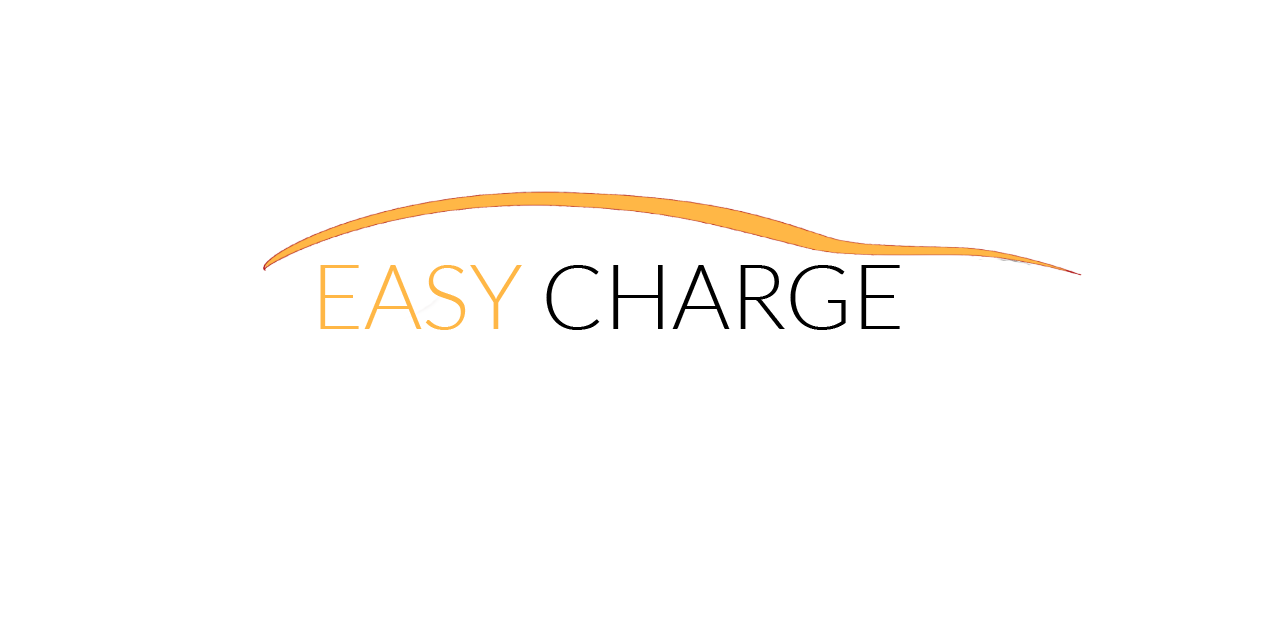
<style>
.page{position:relative;width:1280px;height:640px;background:#ffffff}
.page>*{position:absolute;margin:0}
.t1{font:90px "Lato-Light";color:#000000}
.t2{font:90px "Lato-Light";color:#ffb746}
</style>
<div class="page">
<p class="t1" style="left:320px;top:265px;width:580px;height:65px"><span class="t2">EASY </span>CHARGE</p>
</div>
